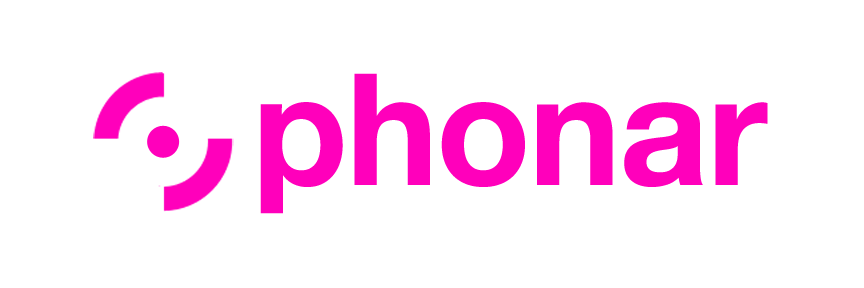
<style>
.page{position:relative;width:864px;height:288px;background:#ffffff}
.page>*{position:absolute;margin:0}
.t1{font:266.7px "HelveticaNeue-Bold";color:#ff00bb}
</style>
<div class="page">
<p class="t1" style="left:260px;top:73px;width:508px;height:141px">phonar</p>
</div>
